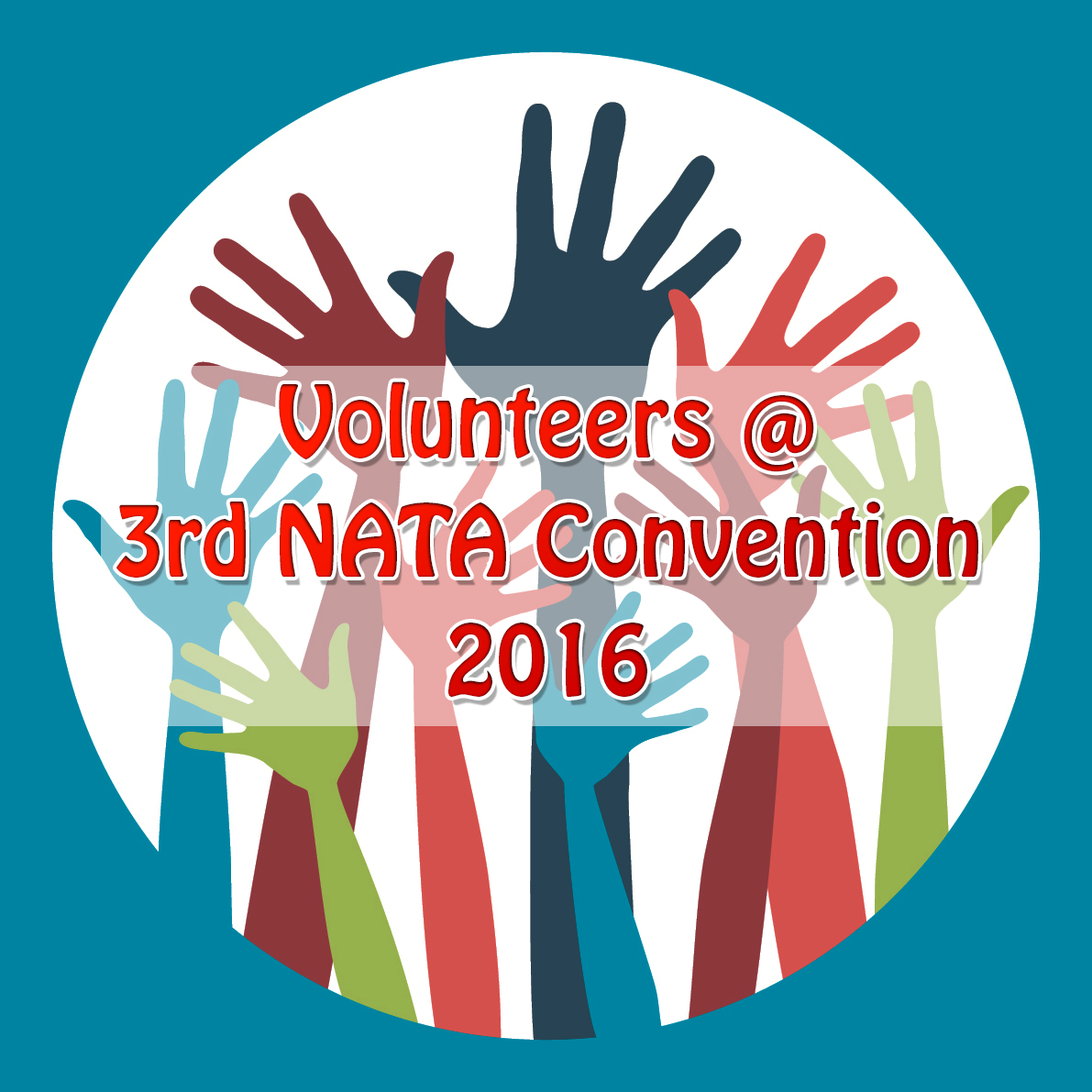
<style>
.page{position:relative;width:1092px;height:1092px;background:#0082a1}
.page>*{position:absolute;margin:0}
.t1{font:88.5px/118.8px "HoboStd"}
</style>
<div class="page">
<p class="t1" style="left:116px;top:381px;width:862px;height:316px;text-align:center">Volunteers @<br>3rd NATA Convention<br>2016</p>
</div>
